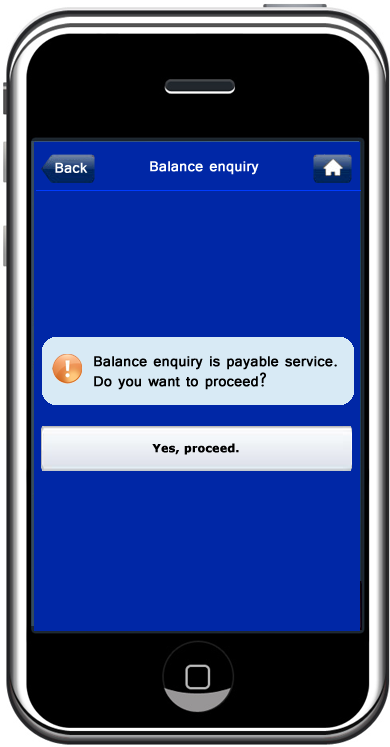
<style>
.page{position:relative;width:390px;height:747px;background:#0027a6}
.page>*{position:absolute;margin:0}
.t1{font:18px "Tunga";color:#ffffff;font-weight:bold}
.t2{font:18px/20px "Tunga";color:#000000;font-weight:bold}
.t3{font:11px "Verdana-Bold";color:#000000;font-weight:bold}
</style>
<div class="page">
<p class="t1" style="left:150px;top:161px;width:109px;height:14px">Balance enquiry</p>
<p class="t1" style="left:55px;top:162px;width:33px;height:11px">Back</p>
<p class="t2" style="left:94px;top:356px;width:243px;height:34px">Balance enquiry is payable service.<br>Do you want to proceed?</p>
<p class="t3" style="left:152px;top:443px;width:87px;height:12px">Yes, proceed.</p>
</div>
